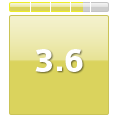
<style>
.page{position:relative;width:117px;height:117px;background:#dad35d}
.page>*{position:absolute;margin:0}
.t1{font:36px "Colaborate-Bold";color:#ffffff;text-transform:uppercase}
</style>
<div class="page">
<p class="t1" style="left:35px;top:49px;width:48px;height:23px">3.6</p>
</div>
